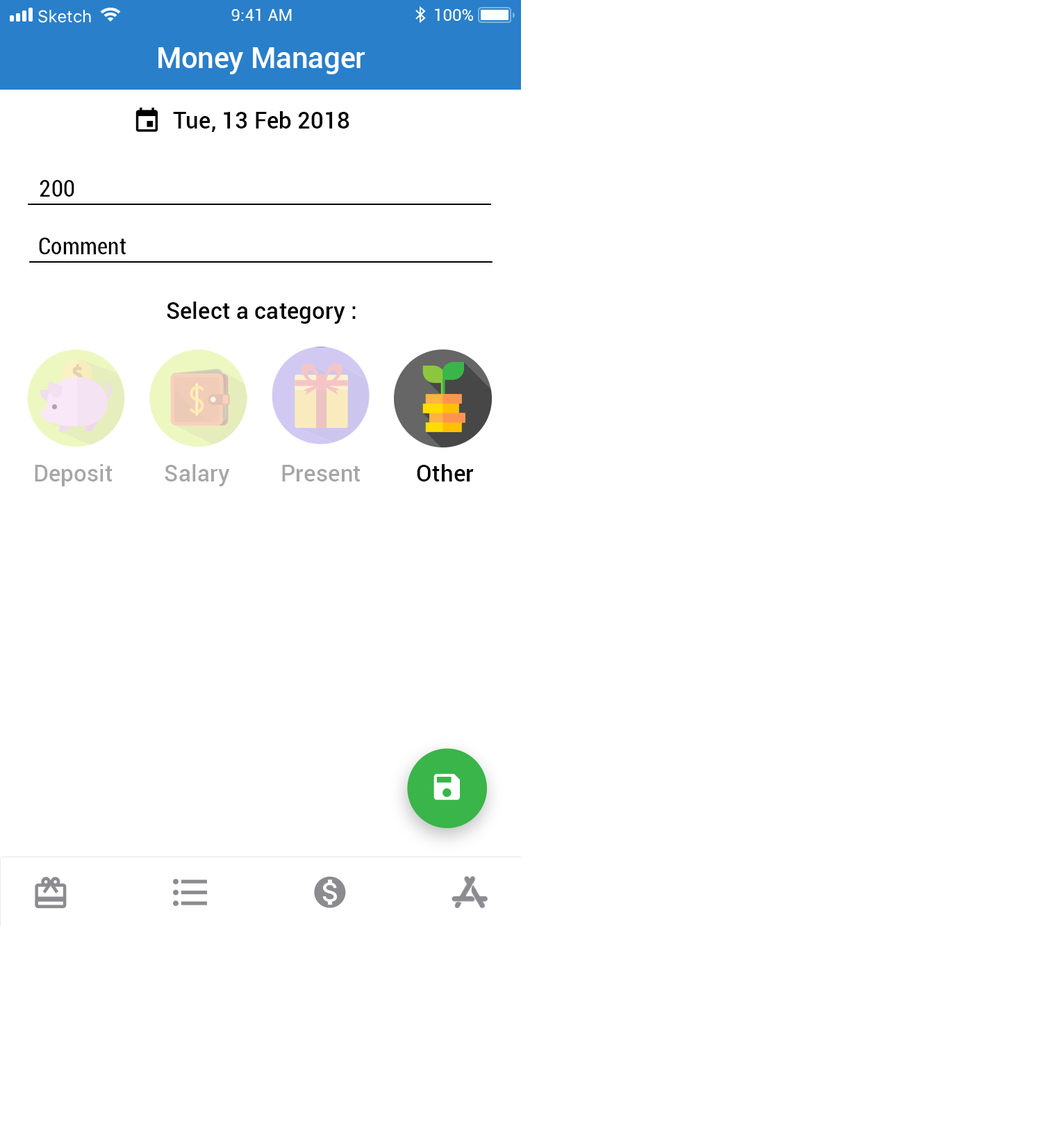
<style>
.page{position:relative;width:1042px;height:1145px;background:#ffffff}
.page>*{position:absolute;margin:0}
.t1{font:28.9px "Roboto-Medium";color:#ffffff}
.t2{font:23.1px "Roboto-Medium";color:#000000}
.t3{font:23.1px "Roboto-Condensed";color:#000000}
.t4{font:23.1px "Roboto-Medium";color:#a6a6a6}
</style>
<div class="page">
<p class="t1" style="left:158px;top:47px;width:207px;height:27px">Money Manager</p>
<p class="t2" style="left:173px;top:111px;width:176px;height:21px">Тue, 13 Feb 2018</p>
<p class="t3" style="left:40px;top:180px;width:34px;height:17px">200</p>
<p class="t3" style="left:39px;top:238px;width:87px;height:16px">Comment</p>
<p class="t2" style="left:167px;top:301px;width:189px;height:23px">Select a category :</p>
<p class="t4" style="left:35px;top:464px;width:78px;height:22px">Deposit</p>
<p class="t4" style="left:165px;top:464px;width:65px;height:22px">Salary</p>
<p class="t4" style="left:282px;top:465px;width:78px;height:16px">Present</p>
<p class="t2" style="left:417px;top:464px;width:57px;height:17px">Other</p>
</div>
